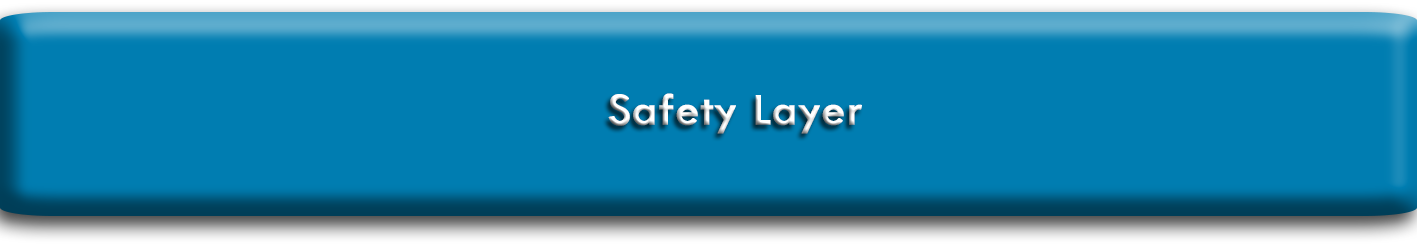
<style>
.page{position:relative;width:1417px;height:247px;background:#007db1}
.page>*{position:absolute;margin:0}
.t1{font:46.8px "TwCenMT-Regular";font-weight:bold}
</style>
<div class="page">
<p class="t1" style="left:608px;top:93px;width:254px;height:41px">Safety Layer</p>
</div>
